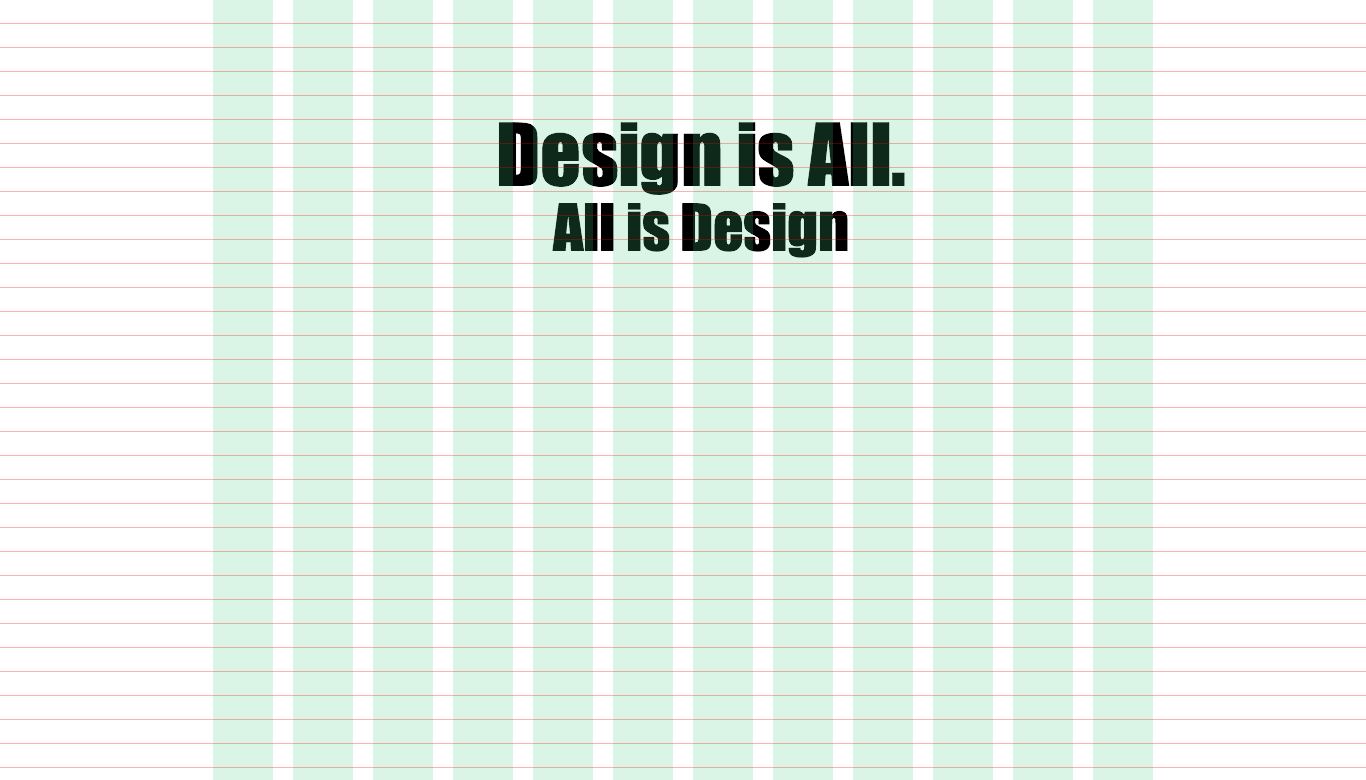
<style>
.page{position:relative;width:1366px;height:780px;background:#daf5e6}
.page>*{position:absolute;margin:0}
.t1{font:80px/65px "Impact";letter-spacing:-0.005em;color:#0e291a}
.t2{font:60px/65px "Impact";letter-spacing:-0.005em;color:#0e291a}
</style>
<div class="page">
<p class="t1" style="left:498px;top:122px;width:407px;height:136px;text-align:center">Design is All.<br><span class="t2">All is Design</span></p>
</div>
